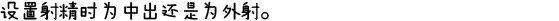
<style>
.page{position:relative;width:559px;height:21px;background:#ffffff}
.page>*{position:absolute;margin:0}
.t1{font:22px "¢è?";color:#000000}
</style>
<div class="page">
<p class="t1" style="left:0px;top:1px;width:269px;height:19px">设置射精时为中出还是为外射。</p>
</div>
